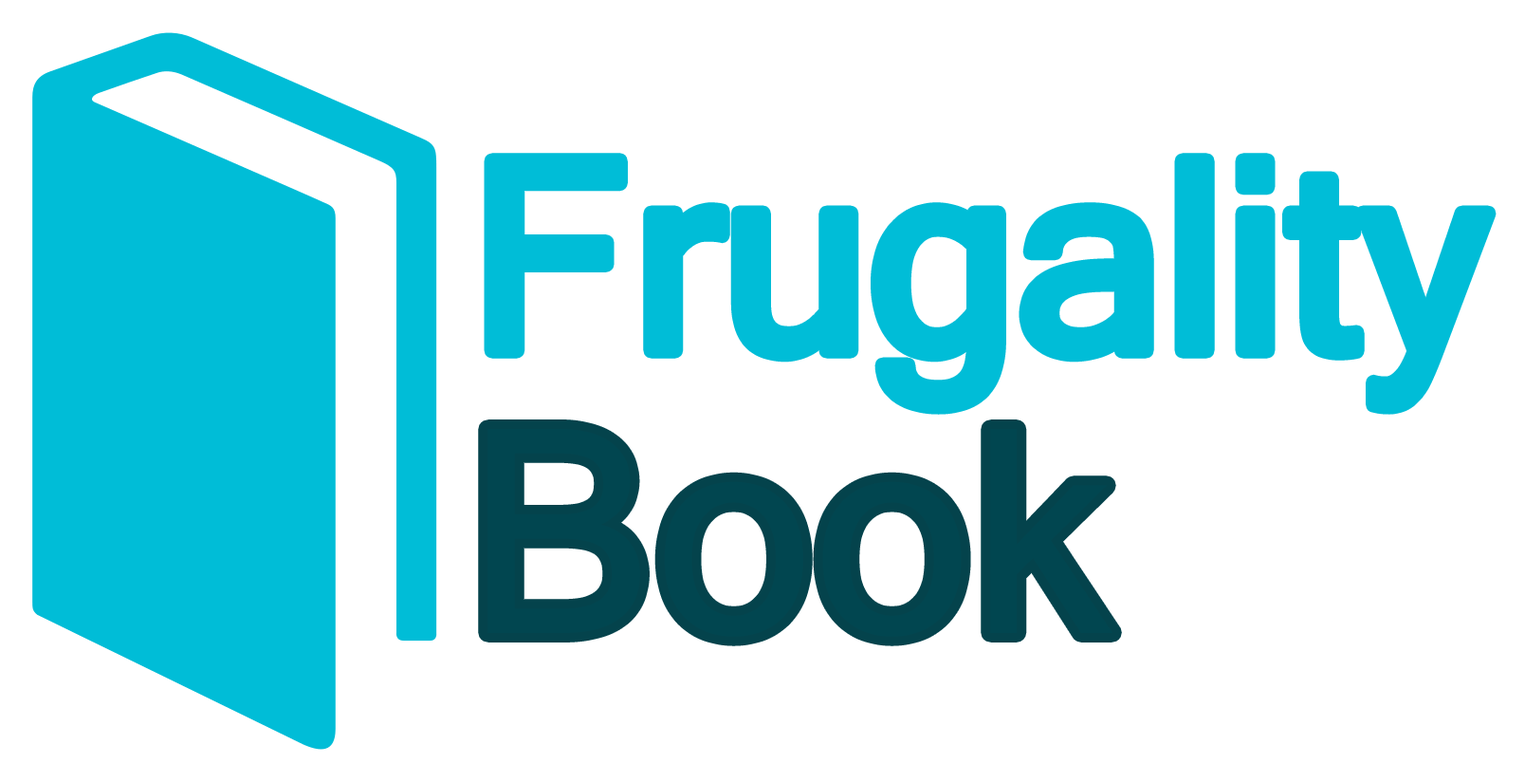
<style>
.page{position:relative;width:1525px;height:782px;background:#ffffff}
.page>*{position:absolute;margin:0}
.t1{font:265.6px "MicrosoftSansSerif";color:#00bdd7}
.t2{font:284.6px "MicrosoftSansSerif";color:#014650}
</style>
<div class="page">
<p class="t1" style="left:491px;top:160px;width:998px;height:247px">Frugality</p>
<p class="t2" style="left:488px;top:429px;width:625px;height:208px">Book</p>
</div>
